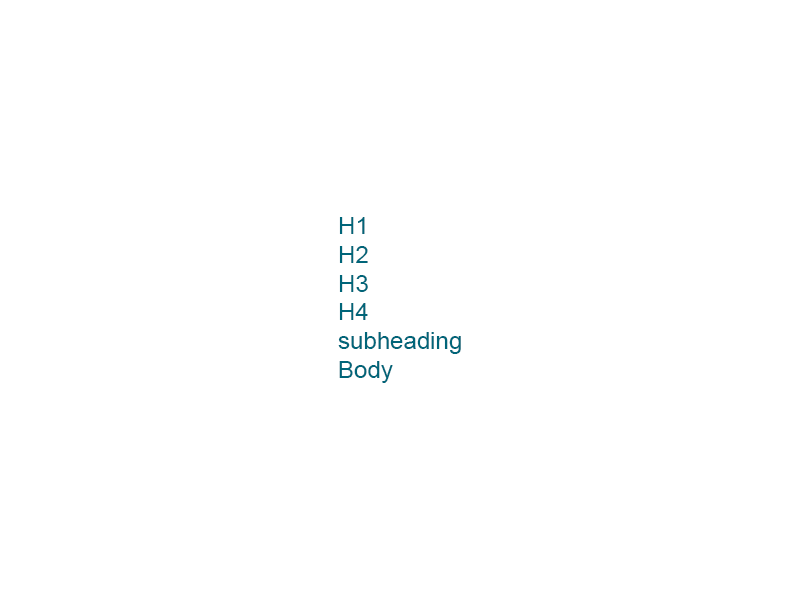
<style>
.page{position:relative;width:800px;height:600px;background:#ffffff}
.page>*{position:absolute;margin:0}
.t1{font:24px "ArialMT";color:#006579}
</style>
<div class="page">
<p class="t1" style="left:338px;top:217px;width:123px;height:166px">H1<br>H2<br>H3<br>H4<br>subheading<br>Body</p>
</div>
